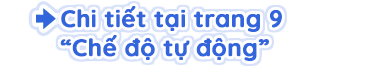
<style>
.page{position:relative;width:368px;height:68px;background:#ffffff}
.page>*{position:absolute;margin:0}
.t1{font:24px "Quicksand-Bold";color:#3264dc;font-weight:bold}
</style>
<div class="page">
<p class="t1" style="left:60px;top:6px;width:222px;height:55px">Chi tiết tại trang 9<br>“Chế độ tự động”</p>
</div>
